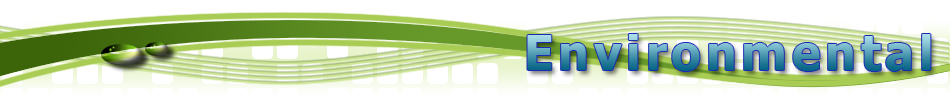
<style>
.page{position:relative;width:950px;height:100px;background:#ffffff}
.page>*{position:absolute;margin:0}
.t1{font:48px "Tahoma-Bold";letter-spacing:0.1em}
</style>
<div class="page">
<p class="t1" style="left:527px;top:34px;width:404px;height:37px">Environmental</p>
</div>
